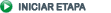
<style>
.page{position:relative;width:111px;height:13px;background:#ffffff}
.page>*{position:absolute;margin:0}
.t1{font:8.7px "ArialRoundedMTBold";color:#465864;font-weight:bold}
</style>
<div class="page">
<p class="t1" style="left:18px;top:3px;width:68px;height:8px">INICIAR ETAPA</p>
</div>
